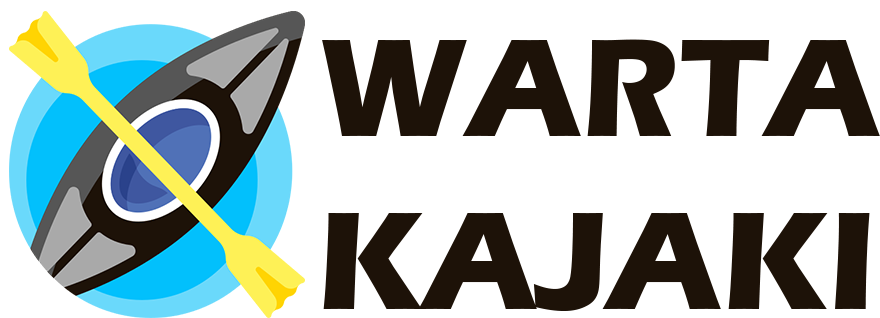
<style>
.page{position:relative;width:880px;height:318px;background:#ffffff}
.page>*{position:absolute;margin:0}
.t1{font:143.9px "ErasITC-Bold";color:#1d1208;scale:0.97 1}
</style>
<div class="page">
<p class="t1" style="left:322px;top:39px;width:558px;height:272px">WARTA<br>KAJAKI</p>
</div>
